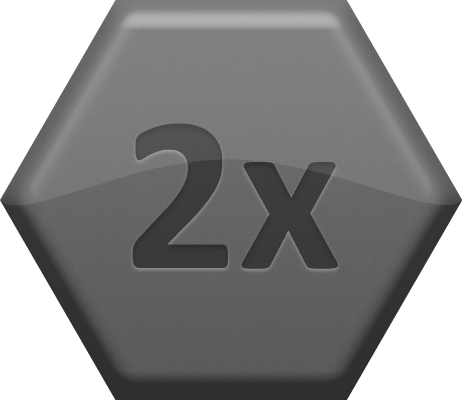
<style>
.page{position:relative;width:462px;height:400px;background:#ffffff}
.page>*{position:absolute;margin:0}
.t1{font:224.6px "Calibri-Bold";color:#3b3b3b}
</style>
<div class="page">
<p class="t1" style="left:132px;top:123px;width:206px;height:146px">2x</p>
</div>
